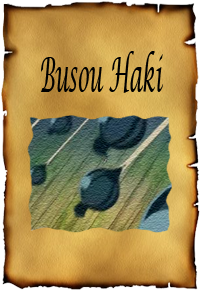
<style>
.page{position:relative;width:200px;height:290px}
.page>*{position:absolute;margin:0}
.t1{font:48px "LucidaCalligraphy-Italic";color:#000000;scale:0.41 1}
</style>
<div class="page">
<p class="t1" style="left:41px;top:51px;width:122px;height:42px">Busou Haki</p>
</div>
